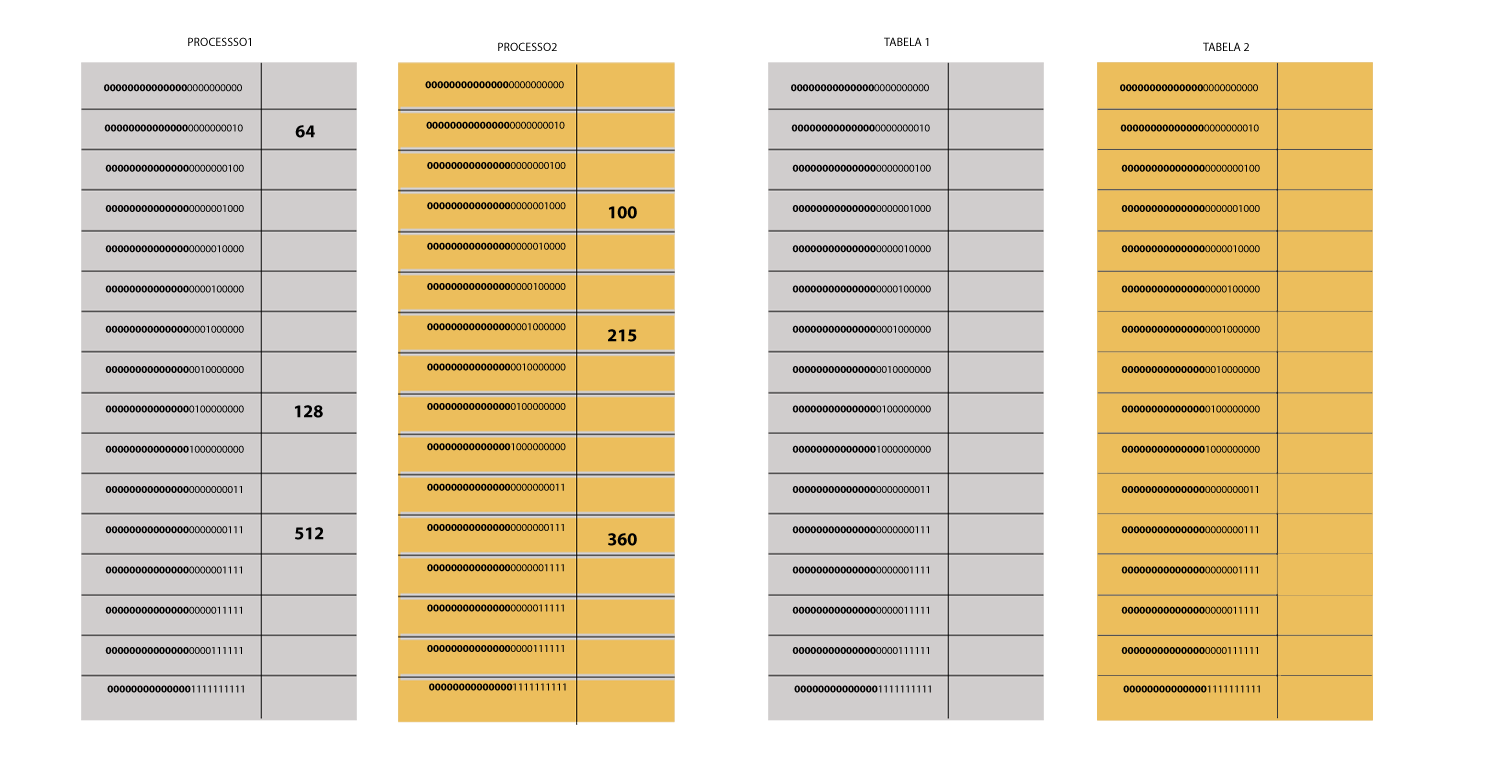
<style>
.page{position:relative;width:1500px;height:768px;background:#ffffff}
.page>*{position:absolute;margin:0}
.t1{font:12px "MyriadPro-Regular";color:#000000;text-transform:uppercase}
.t2{font:10.7px "MyriadPro-Bold";color:#000000;text-transform:uppercase}
.t3{font:10.7px "MyriadPro-Regular";color:#000000;text-transform:uppercase}
.t4{font:10.8px "MyriadPro-Bold";color:#000000;text-transform:uppercase}
.t5{font:10.8px "MyriadPro-Regular";color:#000000;text-transform:uppercase}
.t6{font:18px "MyriadPro-Bold";color:#000000;text-transform:uppercase}
</style>
<div class="page">
<p class="t1" style="left:188px;top:37px;width:63px;height:9px">Processso1</p>
<p class="t1" style="left:884px;top:37px;width:45px;height:9px">Tabela 1</p>
<p class="t1" style="left:498px;top:42px;width:59px;height:9px">Processo2</p>
<p class="t1" style="left:1203px;top:42px;width:46px;height:9px">Tabela 2</p>
<p class="t2" style="left:104px;top:84px;width:138px;height:8px">00000000000000<span class="t3">0000000000</span></p>
<p class="t4" style="left:425px;top:81px;width:139px;height:8px">00000000000000<span class="t5">0000000000</span></p>
<p class="t2" style="left:791px;top:84px;width:138px;height:8px">00000000000000<span class="t3">0000000000</span></p>
<p class="t2" style="left:1120px;top:84px;width:138px;height:8px">00000000000000<span class="t3">0000000000</span></p>
<p class="t2" style="left:104px;top:124px;width:139px;height:8px">00000000000000<span class="t3">0000000010</span></p>
<p class="t6" style="left:295px;top:125px;width:20px;height:13px">64</p>
<p class="t4" style="left:426px;top:121px;width:139px;height:8px">00000000000000<span class="t5">0000000010</span></p>
<p class="t2" style="left:791px;top:124px;width:139px;height:8px">00000000000000<span class="t3">0000000010</span></p>
<p class="t2" style="left:1120px;top:124px;width:139px;height:8px">00000000000000<span class="t3">0000000010</span></p>
<p class="t2" style="left:105px;top:164px;width:139px;height:8px">00000000000000<span class="t3">0000000100</span></p>
<p class="t4" style="left:427px;top:162px;width:139px;height:7px">00000000000000<span class="t5">0000000100</span></p>
<p class="t2" style="left:792px;top:164px;width:139px;height:8px">00000000000000<span class="t3">0000000100</span></p>
<p class="t2" style="left:1121px;top:164px;width:139px;height:8px">00000000000000<span class="t3">0000000100</span></p>
<p class="t2" style="left:105px;top:205px;width:139px;height:7px">00000000000000<span class="t3">0000001000</span></p>
<p class="t4" style="left:427px;top:202px;width:139px;height:8px">00000000000000<span class="t5">0000001000</span></p>
<p class="t6" style="left:608px;top:206px;width:29px;height:13px">100</p>
<p class="t2" style="left:792px;top:205px;width:139px;height:7px">00000000000000<span class="t3">0000001000</span></p>
<p class="t2" style="left:1121px;top:205px;width:139px;height:7px">00000000000000<span class="t3">0000001000</span></p>
<p class="t2" style="left:105px;top:245px;width:139px;height:8px">00000000000000<span class="t3">0000010000</span></p>
<p class="t4" style="left:427px;top:242px;width:139px;height:8px">00000000000000<span class="t5">0000010000</span></p>
<p class="t2" style="left:792px;top:245px;width:139px;height:8px">00000000000000<span class="t3">0000010000</span></p>
<p class="t2" style="left:1121px;top:245px;width:139px;height:8px">00000000000000<span class="t3">0000010000</span></p>
<p class="t2" style="left:105px;top:285px;width:139px;height:8px">00000000000000<span class="t3">0000100000</span></p>
<p class="t4" style="left:427px;top:283px;width:139px;height:7px">00000000000000<span class="t5">0000100000</span></p>
<p class="t2" style="left:792px;top:285px;width:139px;height:8px">00000000000000<span class="t3">0000100000</span></p>
<p class="t2" style="left:1121px;top:285px;width:139px;height:8px">00000000000000<span class="t3">0000100000</span></p>
<p class="t2" style="left:105px;top:325px;width:139px;height:8px">00000000000000<span class="t3">0001000000</span></p>
<p class="t4" style="left:427px;top:323px;width:139px;height:8px">00000000000000<span class="t5">0001000000</span></p>
<p class="t6" style="left:608px;top:329px;width:29px;height:13px">215</p>
<p class="t2" style="left:792px;top:325px;width:139px;height:8px">00000000000000<span class="t3">0001000000</span></p>
<p class="t2" style="left:1121px;top:325px;width:139px;height:8px">00000000000000<span class="t3">0001000000</span></p>
<p class="t2" style="left:105px;top:366px;width:139px;height:7px">00000000000000<span class="t3">0010000000</span></p>
<p class="t4" style="left:427px;top:363px;width:139px;height:8px">00000000000000<span class="t5">0010000000</span></p>
<p class="t2" style="left:792px;top:366px;width:139px;height:7px">00000000000000<span class="t3">0010000000</span></p>
<p class="t2" style="left:1121px;top:366px;width:139px;height:7px">00000000000000<span class="t3">0010000000</span></p>
<p class="t2" style="left:105px;top:405px;width:139px;height:8px">00000000000000<span class="t3">0100000000</span></p>
<p class="t6" style="left:294px;top:405px;width:29px;height:13px">128</p>
<p class="t4" style="left:427px;top:403px;width:139px;height:7px">00000000000000<span class="t5">0100000000</span></p>
<p class="t2" style="left:792px;top:405px;width:139px;height:8px">00000000000000<span class="t3">0100000000</span></p>
<p class="t2" style="left:1121px;top:405px;width:139px;height:8px">00000000000000<span class="t3">0100000000</span></p>
<p class="t2" style="left:105px;top:445px;width:139px;height:8px">00000000000000<span class="t3">1000000000</span></p>
<p class="t4" style="left:427px;top:443px;width:139px;height:8px">00000000000000<span class="t5">1000000000</span></p>
<p class="t2" style="left:792px;top:445px;width:139px;height:8px">00000000000000<span class="t3">1000000000</span></p>
<p class="t2" style="left:1121px;top:445px;width:139px;height:8px">00000000000000<span class="t3">1000000000</span></p>
<p class="t2" style="left:105px;top:486px;width:137px;height:7px">00000000000000<span class="t3">0000000011</span></p>
<p class="t4" style="left:427px;top:483px;width:137px;height:8px">00000000000000<span class="t5">0000000011</span></p>
<p class="t2" style="left:792px;top:486px;width:137px;height:7px">00000000000000<span class="t3">0000000011</span></p>
<p class="t2" style="left:1121px;top:486px;width:137px;height:7px">00000000000000<span class="t3">0000000011</span></p>
<p class="t2" style="left:105px;top:526px;width:137px;height:8px">00000000000000<span class="t3">0000000111</span></p>
<p class="t6" style="left:295px;top:527px;width:29px;height:13px">512</p>
<p class="t4" style="left:427px;top:524px;width:137px;height:7px">00000000000000<span class="t5">0000000111</span></p>
<p class="t6" style="left:608px;top:533px;width:29px;height:13px">360</p>
<p class="t2" style="left:792px;top:526px;width:137px;height:8px">00000000000000<span class="t3">0000000111</span></p>
<p class="t2" style="left:1121px;top:526px;width:137px;height:8px">00000000000000<span class="t3">0000000111</span></p>
<p class="t2" style="left:105px;top:566px;width:137px;height:8px">00000000000000<span class="t3">0000001111</span></p>
<p class="t4" style="left:427px;top:564px;width:137px;height:8px">00000000000000<span class="t5">0000001111</span></p>
<p class="t2" style="left:792px;top:566px;width:137px;height:8px">00000000000000<span class="t3">0000001111</span></p>
<p class="t2" style="left:1121px;top:566px;width:137px;height:8px">00000000000000<span class="t3">0000001111</span></p>
<p class="t2" style="left:105px;top:606px;width:137px;height:8px">00000000000000<span class="t3">0000011111</span></p>
<p class="t4" style="left:427px;top:604px;width:137px;height:8px">00000000000000<span class="t5">0000011111</span></p>
<p class="t2" style="left:792px;top:606px;width:137px;height:8px">00000000000000<span class="t3">0000011111</span></p>
<p class="t2" style="left:1121px;top:606px;width:137px;height:8px">00000000000000<span class="t3">0000011111</span></p>
<p class="t2" style="left:105px;top:647px;width:137px;height:7px">00000000000000<span class="t3">0000111111</span></p>
<p class="t4" style="left:427px;top:645px;width:137px;height:7px">00000000000000<span class="t5">0000111111</span></p>
<p class="t2" style="left:792px;top:647px;width:137px;height:7px">00000000000000<span class="t3">0000111111</span></p>
<p class="t2" style="left:1121px;top:647px;width:137px;height:7px">00000000000000<span class="t3">0000111111</span></p>
<p class="t2" style="left:107px;top:685px;width:137px;height:8px">00000000000000<span class="t3">1111111111</span></p>
<p class="t4" style="left:429px;top:683px;width:137px;height:8px">00000000000000<span class="t5">1111111111</span></p>
<p class="t2" style="left:794px;top:685px;width:137px;height:8px">00000000000000<span class="t3">1111111111</span></p>
<p class="t2" style="left:1123px;top:685px;width:137px;height:8px">00000000000000<span class="t3">1111111111</span></p>
</div>
